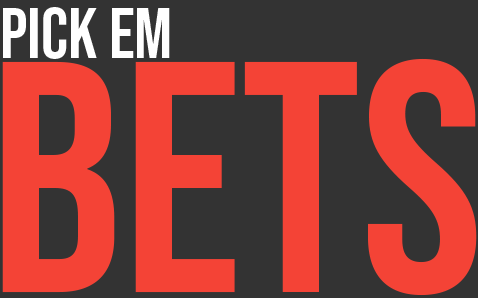
<style>
.page{position:relative;width:478px;height:298px;background:#333333}
.page>*{position:absolute;margin:0}
.t1{font:70.8px "BebasNeue-Regular";color:#ffffff}
.t2{font:329.2px "BebasNeue-Regular";color:#f44336}
</style>
<div class="page">
<p class="t1" style="left:3px;top:7px;width:167px;height:52px">Pick em</p>
<p class="t2" style="left:2px;top:58px;width:475px;height:238px">Bets</p>
</div>
